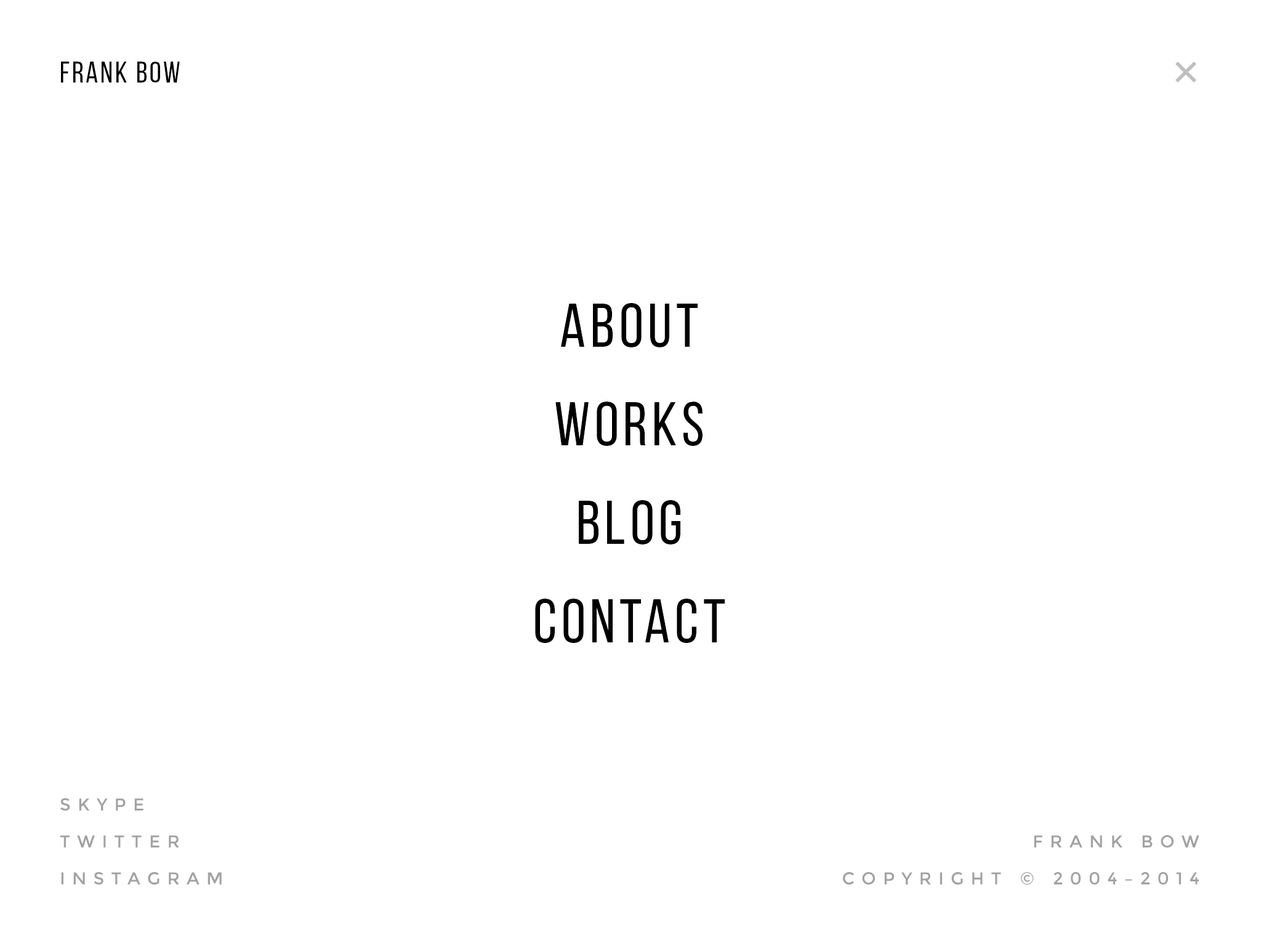
<style>
.page{position:relative;width:1261px;height:946px;background:#ffffff}
.page>*{position:absolute;margin:0}
.t1{font:29.6px "BebasNeueRegular";letter-spacing:0.075em;color:#000000;text-transform:uppercase}
.t2{font:61.6px/98.5px "BebasNeueRegular";letter-spacing:0.075em;color:#000000;text-transform:uppercase}
.t3{font:17.2px/36.9px "Montserrat-Regular";letter-spacing:0.4em;color:#a2a2a2;text-transform:uppercase}
</style>
<div class="page">
<p class="t1" style="left:61px;top:62px;width:119px;height:21px">FRANK BOW</p>
<p class="t2" style="left:535px;top:303px;width:190px;height:340px;text-align:center">ABOUT<br>WORKS<br>BLOG<br>CONTACT</p>
<p class="t3" style="left:60px;top:798px;width:162px;height:87px">SKYPE<br>TWITTER<br>INSTAGRAM</p>
<p class="t3" style="left:843px;top:835px;width:356px;height:50px;text-align:right">FRANK BOW<br>Copyright © 2004–2014</p>
</div>
